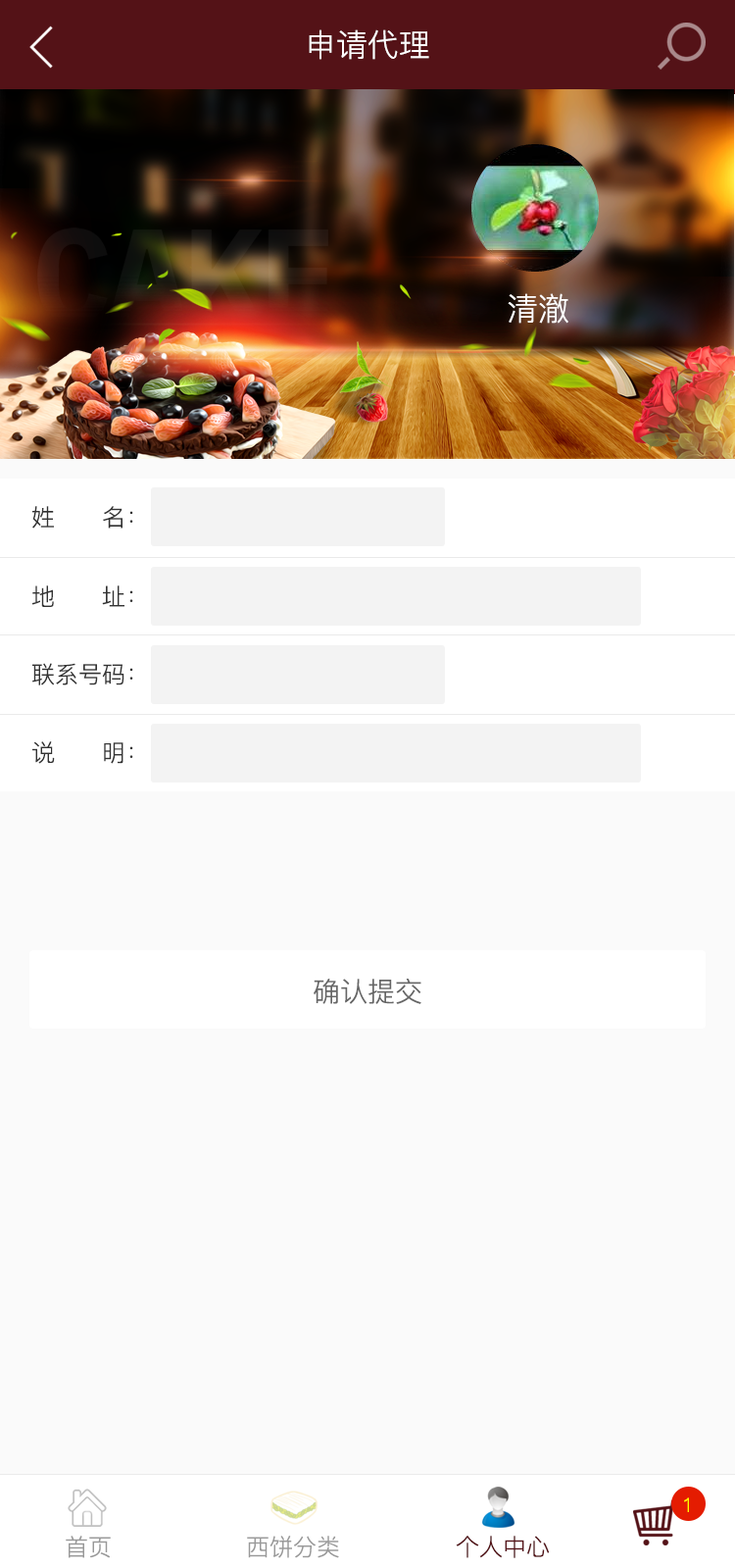
<style>
.page{position:relative;width:735px;height:1568px;background:#fafafa}
.page>*{position:absolute;margin:0}
.t1{font:31.4px "PingFang-SC-Regular";color:#ffffff}
.t2{font:23.5px "PingFang-SC-Regular";color:#333333}
.t3{font:27.5px "PingFang-SC-Regular";color:#666666}
.t4{font:19.6px "PingFang-SC-Regular";color:#ffff00}
.t5{font:23.5px "PingFang-SC-Regular";color:#999999}
.t6{font:23.5px "PingFang-SC-Regular";color:#541217}
</style>
<div class="page">
<p class="t1" style="left:309px;top:29px;width:121px;height:31px">申请代理</p>
<p class="t1" style="left:508px;top:293px;width:61px;height:31px">清澈</p>
<p class="t2" style="left:32px;top:506px;width:101px;height:23px">姓      名：</p>
<p class="t2" style="left:32px;top:585px;width:101px;height:22px">地      址：</p>
<p class="t2" style="left:32px;top:663px;width:101px;height:22px">联系号码：</p>
<p class="t2" style="left:32px;top:741px;width:101px;height:23px">说      明：</p>
<p class="t3" style="left:314px;top:979px;width:108px;height:25px">确认提交</p>
<p class="t4" style="left:684px;top:1497px;width:5px;height:15px">1</p>
<p class="t5" style="left:66px;top:1536px;width:45px;height:22px">首页</p>
<p class="t5" style="left:247px;top:1536px;width:92px;height:22px">西饼分类</p>
<p class="t6" style="left:456px;top:1536px;width:94px;height:22px">个人中心</p>
</div>
